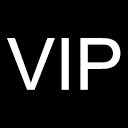
<style>
.page{position:relative;width:128px;height:128px;background:#000000}
.page>*{position:absolute;margin:0}
.t1{font:71.9px "ArialMT";color:#ffffff}
</style>
<div class="page">
<p class="t1" style="left:7px;top:38px;width:114px;height:52px">VIP</p>
</div>
